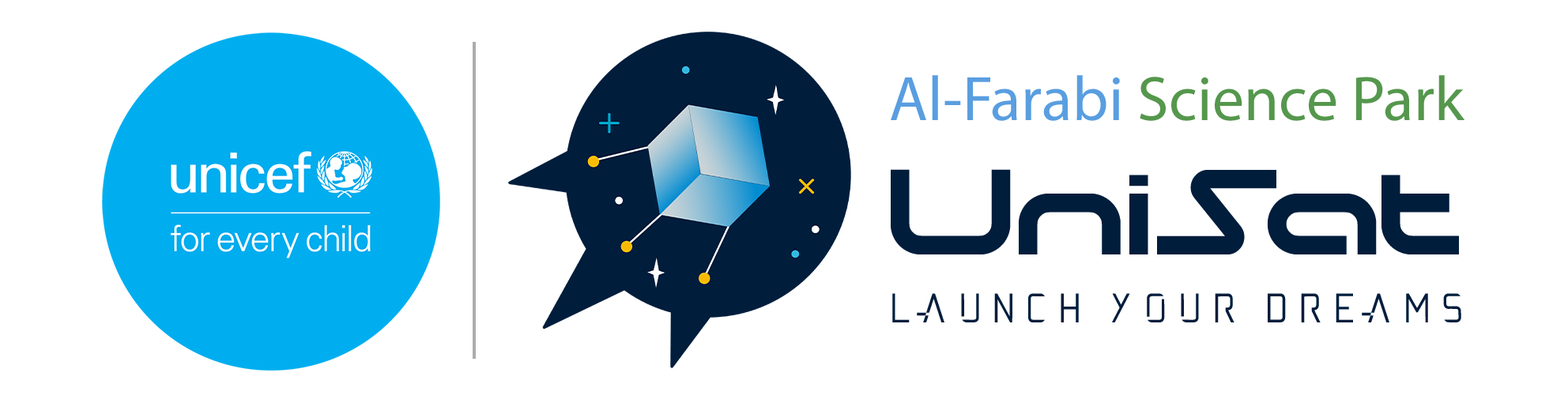
<style>
.page{position:relative;width:1568px;height:403px;background:#ffffff}
.page>*{position:absolute;margin:0}
.t1{font:63.2px "MyriadPro-Regular";color:#55974d}
.t2{font:63.2px "MyriadPro-Regular";color:#599ee0}
.t3{font:154.1px "moonhouse";color:#001d3c}
.t4{font:57.7px "andromeda";color:#001d3c}
</style>
<div class="page">
<p class="t1" style="left:891px;top:75px;width:574px;height:46px"><span class="t2">Al-Farabi </span>Science Park</p>
<p class="t3" style="left:891px;top:169px;width:568px;height:85px">UniSat</p>
<p class="t4" style="left:892px;top:293px;width:569px;height:29px">launch your dreams</p>
</div>
